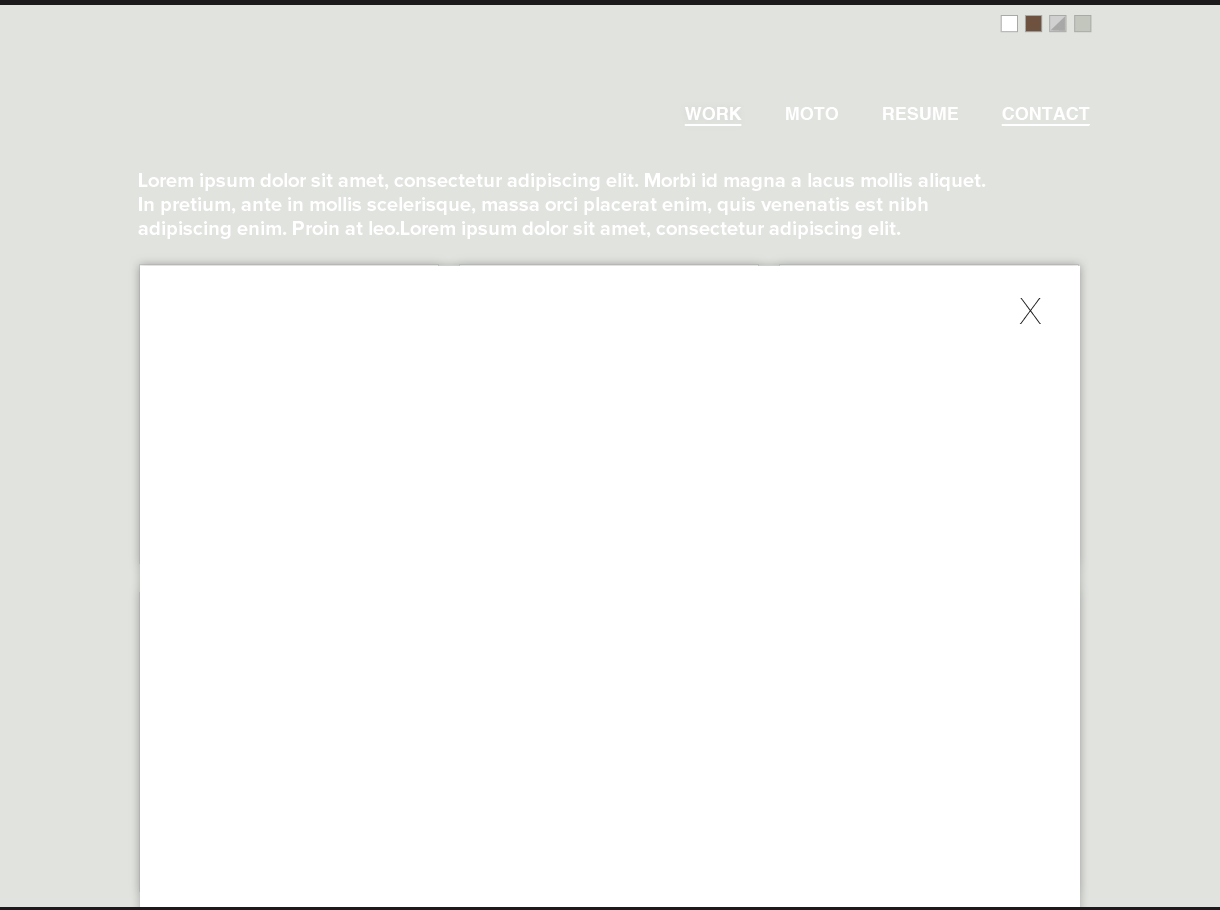
<style>
.page{position:relative;width:1220px;height:910px;background:#ffffff}
.page>*{position:absolute;margin:0}
.t1{font:18px "Helvetica-Bold";color:#ffffff;text-decoration:underline}
.t2{font:18px "Helvetica-Bold";color:#ffffff}
.t3{font:20px/24px "ProximaNova-Bold";color:#ffffff}
.t4{font:36px "HelveticaNeue-UltraLight";color:#1c1a1a}
</style>
<div class="page">
<p class="t1" style="left:684px;top:107px;width:58px;height:19px">WORK</p>
<p class="t2" style="left:786px;top:107px;width:52px;height:13px">MOTO</p>
<p class="t2" style="left:883px;top:107px;width:75px;height:13px">RESUME</p>
<p class="t1" style="left:1001px;top:107px;width:89px;height:19px">CONTACT</p>
<p class="t3" style="left:138px;top:173px;width:848px;height:66px">Lorem ipsum dolor sit amet, consectetur adipiscing elit. Morbi id magna a lacus mollis aliquet.<br>In pretium, ante in mollis scelerisque, massa orci placerat enim, quis venenatis est nibh<br>adipiscing enim. Proin at leo.Lorem ipsum dolor sit amet, consectetur adipiscing elit.</p>
<p class="t4" style="left:1019px;top:298px;width:22px;height:26px">X</p>
</div>
